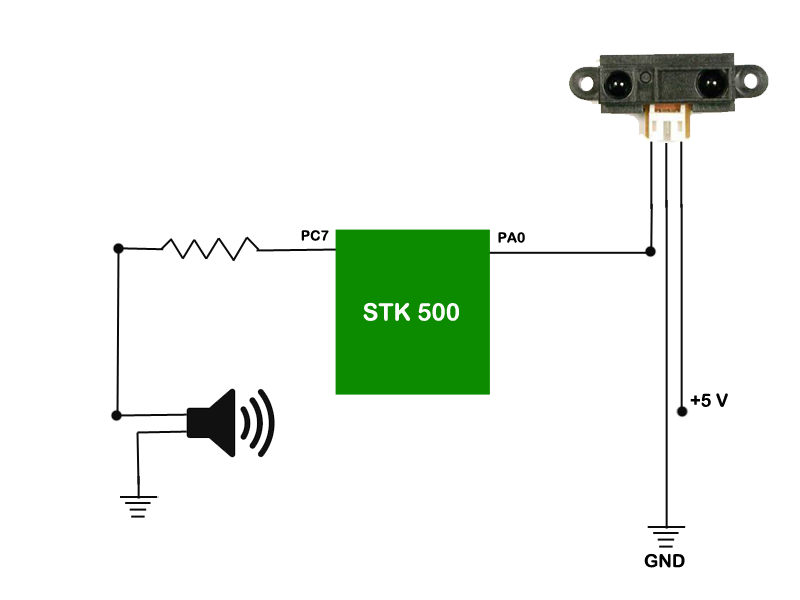
<style>
.page{position:relative;width:800px;height:600px;background:#ffffff}
.page>*{position:absolute;margin:0}
.t1{font:14px "ArialRoundedMTBold";color:#010000}
.t2{font:24px "ArialRoundedMTBold";color:#ffffff}
.t3{font:18px "ArialRoundedMTBold";color:#000000}
</style>
<div class="page">
<p class="t1" style="left:301px;top:230px;width:28px;height:11px">PC7</p>
<p class="t1" style="left:498px;top:232px;width:27px;height:11px">PA0</p>
<p class="t2" style="left:363px;top:302px;width:96px;height:19px">STK 500</p>
<p class="t3" style="left:690px;top:393px;width:38px;height:14px">+5 V</p>
<p class="t3" style="left:644px;top:553px;width:41px;height:15px">GND</p>
</div>
